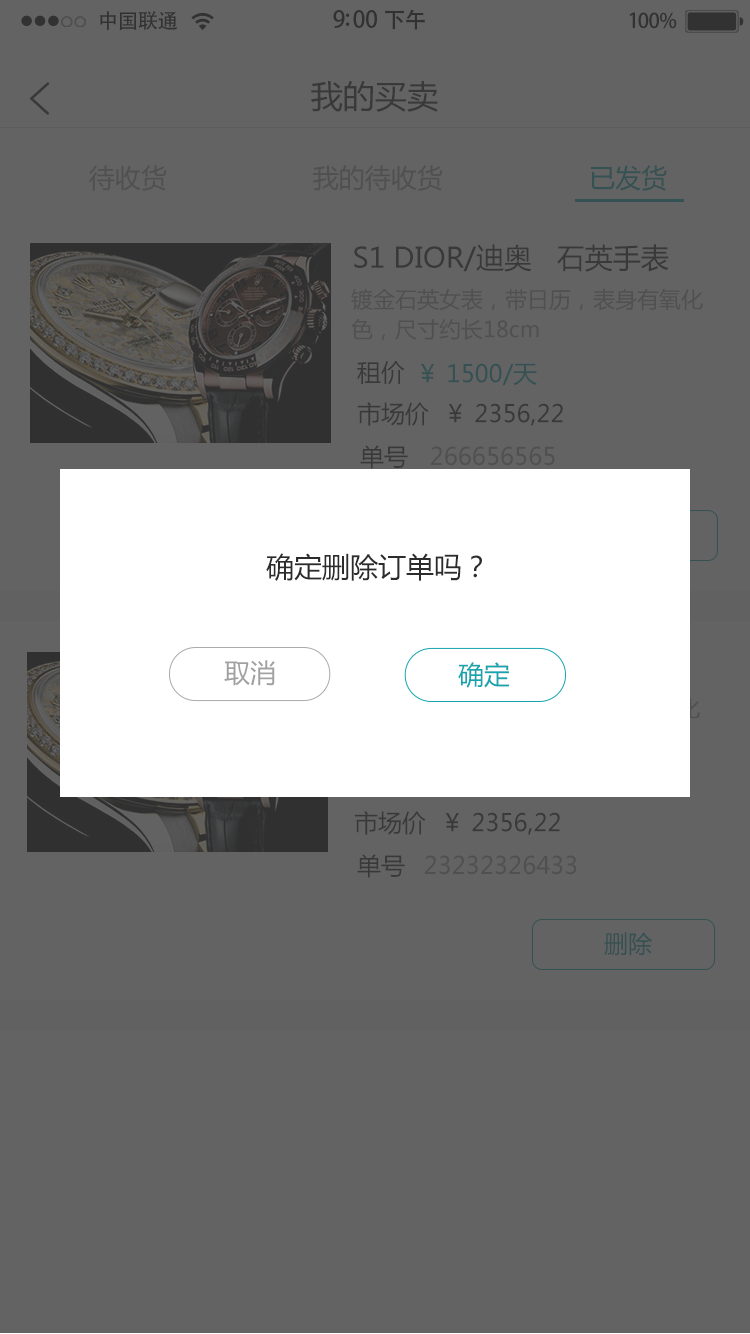
<style>
.page{position:relative;width:750px;height:1334px;background:#636363}
.page>*{position:absolute;margin:0}
.t1{font:20.4px "AdobeHeitiStd-Regular";letter-spacing:-0.02em;color:#333232}
.t2{font:23px "AdobeHeitiStd-Regular";letter-spacing:-0.02em;color:#333232}
.t3{font:22px "AdobeHeitiStd-Regular";letter-spacing:-0.02em;color:#333232}
.t4{font:32px "MicrosoftYaHei";color:#2c2c2c}
.t5{font:26px "MicrosoftYaHei";color:#505050}
.t6{font:28px "MicrosoftYaHei";color:#2c2c2c}
.t7{font:22px/15px "MicrosoftYaHei";color:#505050}
.t8{font:24px "MicrosoftYaHei";color:#2c2c2c}
.t9{font:24px "MicrosoftYaHei";color:#345153}
.t10{font:24px "MicrosoftYaHei";color:#505050}
.t11{font:22px "MicrosoftYaHei";color:#505050}
.t12{font:26px "MicrosoftYaHei";color:#a1a1a1}
.t13{font:26px "MicrosoftYaHei";color:#16a4ae}
</style>
<div class="page">
<p class="t1" style="left:100px;top:11px;width:77px;height:19px">中国联通</p>
<p class="t2" style="left:333px;top:9px;width:92px;height:21px">9:00 <span class="t3">下午</span></p>
<p class="t1" style="left:629px;top:12px;width:48px;height:17px">100%</p>
<p class="t4" style="left:311px;top:81px;width:127px;height:31px">我的买卖</p>
<p class="t5" style="left:89px;top:165px;width:578px;height:26px">待收货                   我的待收货                   已发货</p>
<p class="t6" style="left:354px;top:244px;width:315px;height:28px">S1 DIOR/迪奥   石英手表</p>
<p class="t7" style="left:351px;top:288px;width:352px;height:53px">镀金石英女表，带日历，表身有氧化<br><br>色，尺寸约长18cm</p>
<p class="t8" style="left:357px;top:361px;width:48px;height:24px">租价</p>
<p class="t9" style="left:421px;top:363px;width:116px;height:23px">￥ 1500/天</p>
<p class="t8" style="left:357px;top:402px;width:206px;height:24px">市场价  ￥ 2356,22</p>
<p class="t8" style="left:360px;top:445px;width:48px;height:24px">单号</p>
<p class="t10" style="left:430px;top:446px;width:125px;height:20px"><span class="t11"> </span> 266656565</p>
<p class="t6" style="left:266px;top:553px;width:216px;height:28px">确定删除订单吗？</p>
<p class="t12" style="left:224px;top:660px;width:51px;height:26px">取消</p>
<p class="t13" style="left:458px;top:662px;width:52px;height:26px">确定</p>
<p class="t8" style="left:354px;top:811px;width:206px;height:24px">市场价  ￥ 2356,22</p>
<p class="t8" style="left:357px;top:854px;width:48px;height:24px">单号</p>
<p class="t10" style="left:424px;top:855px;width:153px;height:20px"><span class="t11"> </span> 23232326433</p>
<p class="t9" style="left:604px;top:932px;width:48px;height:24px">删除</p>
</div>
